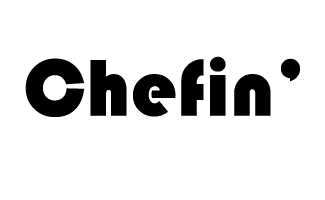
<style>
.page{position:relative;width:325px;height:200px;background:#ffffff}
.page>*{position:absolute;margin:0}
.t1{font:83.3px "Bauhaus93";color:#000000}
</style>
<div class="page">
<p class="t1" style="left:25px;top:56px;width:275px;height:61px">Chefin’</p>
</div>
